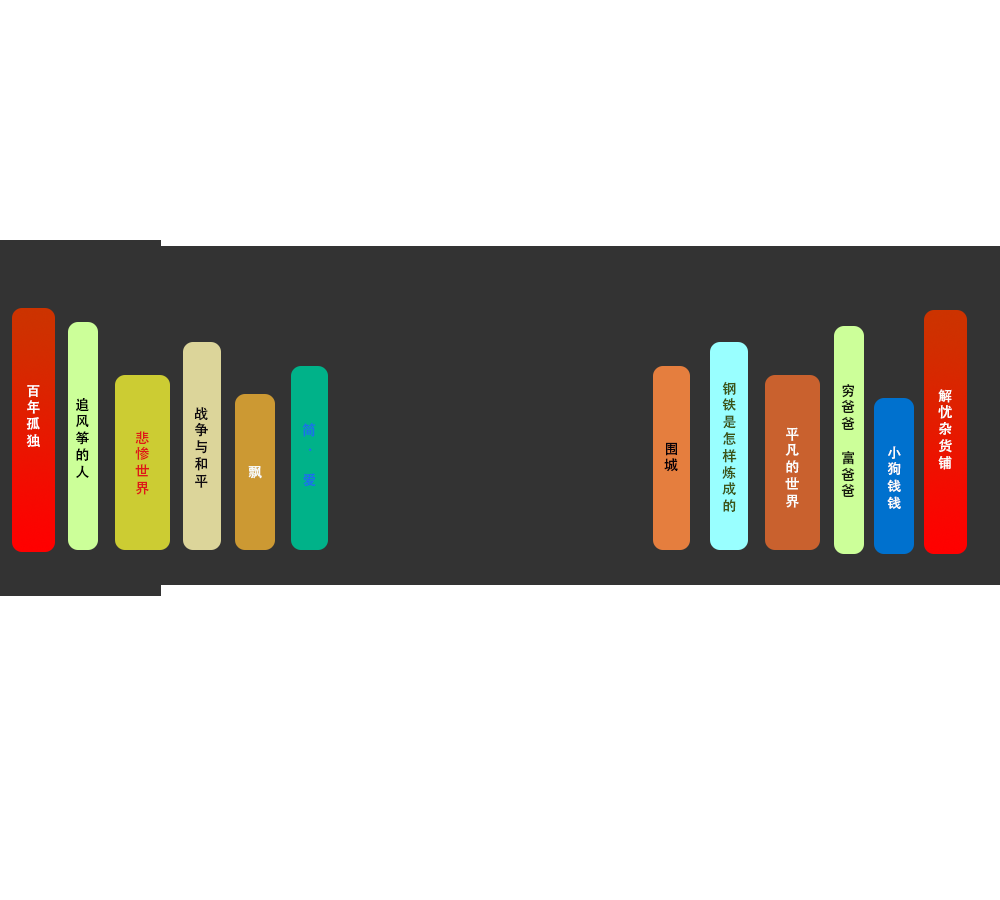
<style>
.page{position:relative;width:1000px;height:900px;background:#ffffff}
.page>*{position:absolute;margin:0}
.t1{font:14px "AdobeHeitiStd-Regular";color:#ffffff;text-transform:uppercase}
.t2{font:14px "AdobeHeitiStd-Regular";color:#3c5617;text-transform:uppercase}
.t3{font:14px "AdobeHeitiStd-Regular";color:#13170d;text-transform:uppercase}
.t4{font:14px "AdobeHeitiStd-Regular";color:#fcfdfa;text-transform:uppercase}
.t5{font:14px "AdobeHeitiStd-Regular";color:#010201;text-transform:uppercase}
.t6{font:14px "AdobeHeitiStd-Regular";color:#0f0a0f;text-transform:uppercase}
.t7{font:14px "AdobeHeitiStd-Regular";color:#1c6eea;text-transform:uppercase}
.t8{font:14px "AdobeHeitiStd-Regular";color:#dd1818;text-transform:uppercase}
.t9{font:14px "AdobeHeitiStd-Regular";color:#070107;text-transform:uppercase}
.t10{font:14px "AdobeHeitiStd-Regular";color:#f7fbf8;text-transform:uppercase}
</style>
<div class="page">
<p class="t1" style="left:26px;top:385px;width:14px;height:62px">百<br>年<br>孤<br>独</p>
<p class="t2" style="left:722px;top:381px;width:15px;height:131px">钢<br>铁<br>是<br>怎<br>样<br>炼<br>成<br>的</p>
<p class="t3" style="left:841px;top:384px;width:14px;height:113px">穷<br>爸<br>爸<br> <br>富<br>爸<br>爸</p>
<p class="t4" style="left:938px;top:389px;width:14px;height:81px">解<br>忧<br>杂<br>货<br>铺</p>
<p class="t5" style="left:76px;top:398px;width:13px;height:80px">追<br>风<br>筝<br>的<br>人</p>
<p class="t6" style="left:194px;top:407px;width:14px;height:81px">战<br>争<br>与<br>和<br>平</p>
<p class="t7" style="left:302px;top:423px;width:14px;height:64px">简<br>  .<br><br>爱</p>
<p class="t8" style="left:135px;top:431px;width:14px;height:64px">悲<br>惨<br>世<br>界</p>
<p class="t4" style="left:785px;top:427px;width:14px;height:81px">平<br>凡<br>的<br>世<br>界</p>
<p class="t9" style="left:664px;top:442px;width:14px;height:30px">围<br>城</p>
<p class="t4" style="left:887px;top:446px;width:14px;height:63px">小<br>狗<br>钱<br>钱</p>
<p class="t10" style="left:248px;top:466px;width:14px;height:13px">飘</p>
</div>
